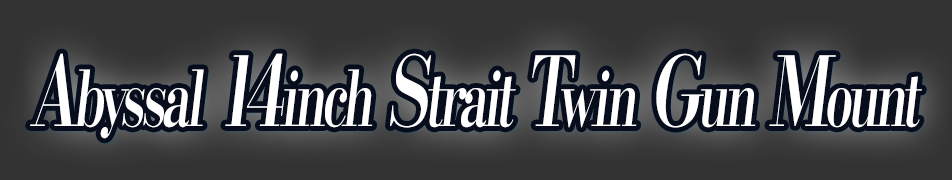
<style>
.page{position:relative;width:952px;height:180px;background:#333333}
.page>*{position:absolute;margin:0}
.t1{font:76.8px "KochoStd-Heavy";letter-spacing:-0.08em;color:#ffffff;font-style:italic;scale:0.67 1}
.t2{font:96px "KochoStd-Heavy";letter-spacing:-0.08em;color:#ffffff;font-style:italic;scale:0.67 1}
</style>
<div class="page">
<p class="t1" style="left:30px;top:53px;width:892px;height:86px"><span class="t2">A</span>byssal<span class="t2"> 14</span>inch<span class="t2"> S</span>trait<span class="t2"> T</span>win<span class="t2"> G</span>un<span class="t2"> M</span>ount</p>
</div>
